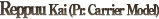
<style>
.page{position:relative;width:159px;height:19px;background:#ffffff}
.page>*{position:absolute;margin:0}
.t1{font:14px "RyuminPro-ExBold";letter-spacing:-0.14em;color:#4a3f32;font-weight:bold;scale:0.9 1}
.t2{font:18px "RyuminPro-ExBold";letter-spacing:-0.14em;color:#4a3f32;font-weight:bold;scale:0.9 1}
</style>
<div class="page">
<p class="t1" style="left:0px;top:1px;width:160px;height:18px"><span class="t2">Reppuu </span>Kai (Pr. Carrier Model)</p>
</div>
